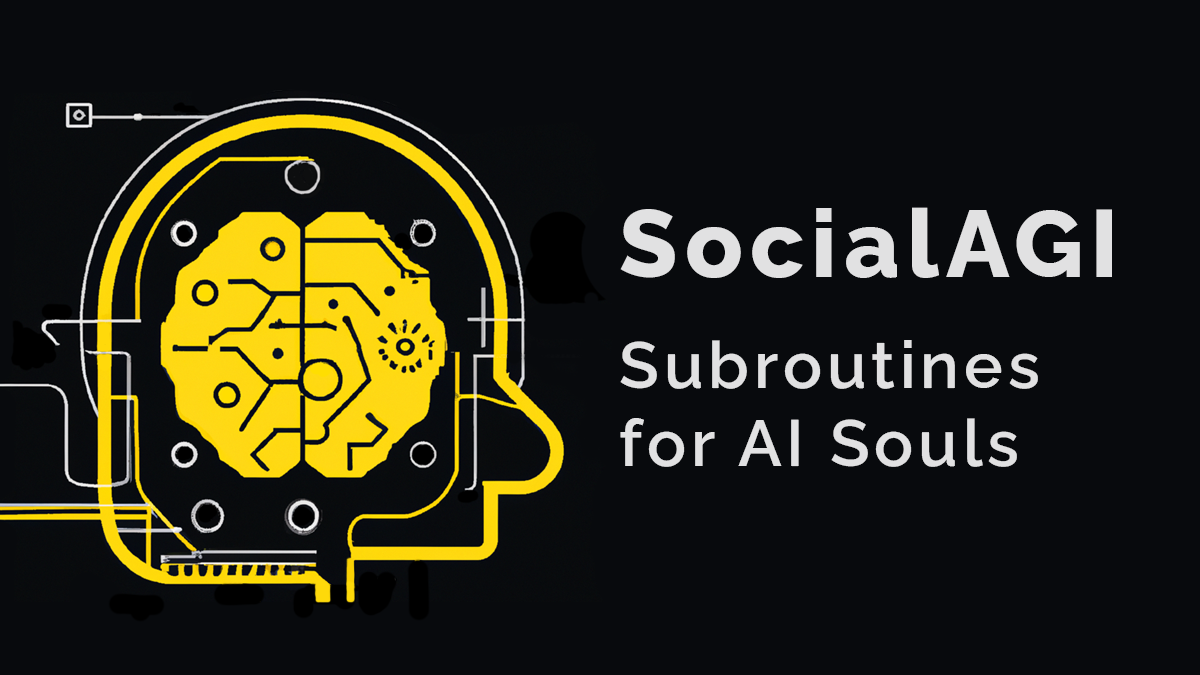
<style>
.page{position:relative;width:1200px;height:675px;background:#080a0d}
.page>*{position:absolute;margin:0}
.t1{font:95px "RalewayRoman-ExtraBold";letter-spacing:0.075em;color:#e1e1e2}
.t2{font:65px "RalewayRoman-SemiBold";letter-spacing:0.075em;color:#e1e1e2}
</style>
<div class="page">
<p class="t1" style="left:620px;top:207px;width:492px;height:71px">SocialAGI</p>
<p class="t2" style="left:620px;top:340px;width:418px;height:127px">Subroutines<br>for AI Souls</p>
</div>
